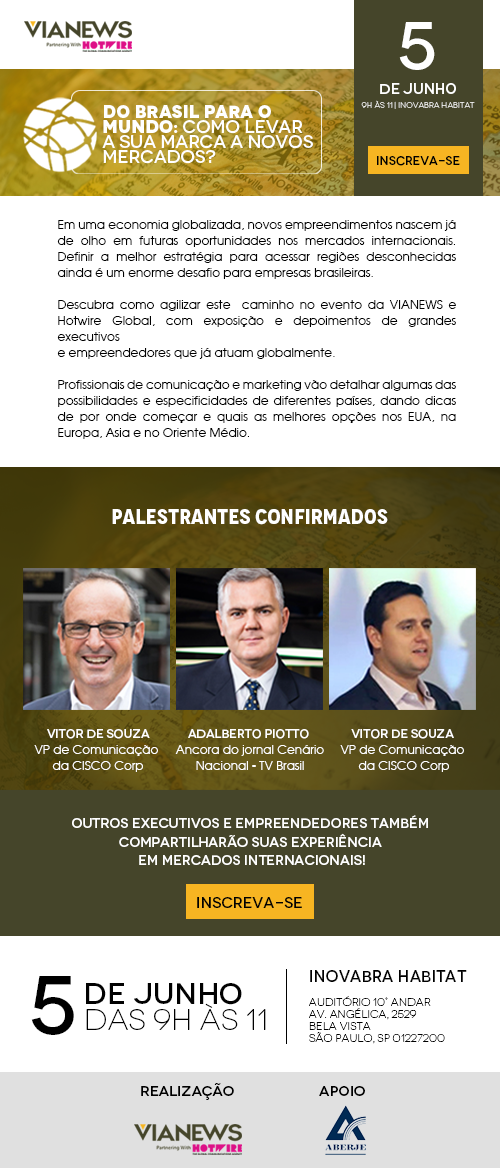
<style>
.page{position:relative;width:500px;height:1168px;background:#ffffff}
.page>*{position:absolute;margin:0}
.t1{font:67.5px "Novecento-WideMedium";color:#ffffff}
.t2{font:14.4px "Novecento-WideMedium";color:#ffffff}
.t3{font:7.9px "Novecento-WideLight";color:#ffffff}
.t4{font:17.8px/15px "Novecento-WideMedium";color:#ffffff}
.t5{font:17.8px/15px "Novecento-WideUltraBold";color:#ffffff}
.t6{font:12px "Novecento-WideMedium";color:#010101}
.t7{font:12px/16px "AvantGarde-Book";color:#000000}
.t8{font:20.8px "Novecento-NarrowBold";color:#ffffff}
.t9{font:12px/16px "AvantGarde-Book";color:#ffffff}
.t10{font:12px/16px "Novecento-WideMedium";color:#ffffff}
.t11{font:13.6px/18.1px "Novecento-WideMedium";color:#ffffff}
.t12{font:15px "Novecento-WideMedium";color:#010101}
.t13{font:82.5px "Novecento-WideMedium";color:#000000}
.t14{font:11px/12px "Novecento-WideLight";color:#000000}
.t15{font:15.9px/33.4px "Novecento-WideMedium";color:#000000}
.t16{font:29.6px/25.6px "Novecento-WideLight";color:#000000}
.t17{font:29.6px/25.6px "Novecento-WideMedium";color:#010101}
.t18{font:14.3px "Novecento-WideMedium";color:#000000}
</style>
<div class="page">
<p class="t1" style="left:399px;top:22px;width:36px;height:48px">5</p>
<p class="t2" style="left:380px;top:83px;width:76px;height:11px">de junho</p>
<p class="t3" style="left:361px;top:100px;width:114px;height:9px">9h às 11 | InovaBra Habitat</p>
<p class="t4" style="left:102px;top:105px;width:211px;height:59px"><span class="t5">Do Brasil para o <br>Mundo:</span> Como levar <br>a sua marca a novos <br>mercados?</p>
<p class="t6" style="left:377px;top:156px;width:83px;height:10px">INSCREVA-SE</p>
<p class="t7" style="left:57px;top:220px;width:399px;height:219px;text-align:justify">Em uma economia globalizada, novos empreendimentos nascem já de olho em futuras oportunidades nos mercados internacionais. Definir a melhor estratégia para acessar regiões desconhecidas ainda é um enorme desafio para empresas brasileiras. <br><br>Descubra como agilizar este  caminho no evento da VIANEWS e Hotwire Global, com exposição e depoimentos de grandes executivos <br>e empreendedores que já atuam globalmente. <br><br>Profissionais de comunicação e marketing vão detalhar algumas das possibilidades e especificidades de diferentes países, dando dicas de por onde começar e quais as melhores opções nos EUA, na Europa, Asia e no Oriente Médio.</p>
<p class="t8" style="left:112px;top:509px;width:276px;height:16px">palestrantes confirmados</p>
<p class="t9" style="left:34px;top:729px;width:124px;height:43px;text-align:center"><span class="t10">Vitor de Souza<br></span>VP de Comunicação <br>da CISCO Corp</p>
<p class="t9" style="left:175px;top:729px;width:149px;height:41px;text-align:center"><span class="t10">Adalberto Piotto <br></span> Ancora do jornal Cenário <br>Nacional - TV Brasil</p>
<p class="t9" style="left:340px;top:729px;width:124px;height:43px;text-align:center"><span class="t10">Vitor de Souza <br></span>VP de Comunicação <br>da CISCO Corp</p>
<p class="t11" style="left:72px;top:815px;width:356px;height:50px;text-align:center">Outros executivos e empreendedores também <br>compartilharão suas experiência <br>em mercados internacionais!</p>
<p class="t12" style="left:197px;top:897px;width:105px;height:11px">INSCREVA-SE</p>
<p class="t13" style="left:31px;top:976px;width:43px;height:59px">5</p>
<p class="t14" style="left:309px;top:970px;width:158px;height:74px"><span class="t15">InovaBra Habitat<br></span><br>Auditório 10° andar<br>Av. Angélica, 2529<br>Bela Vista<br>São Paulo, SP 01227200</p>
<p class="t16" style="left:86px;top:983px;width:180px;height:47px"><span class="t17">de junho<br></span>das 9h às 11</p>
<p class="t18" style="left:141px;top:1083px;width:93px;height:17px">Realização</p>
<p class="t18" style="left:319px;top:1086px;width:46px;height:10px">apoio</p>
</div>
